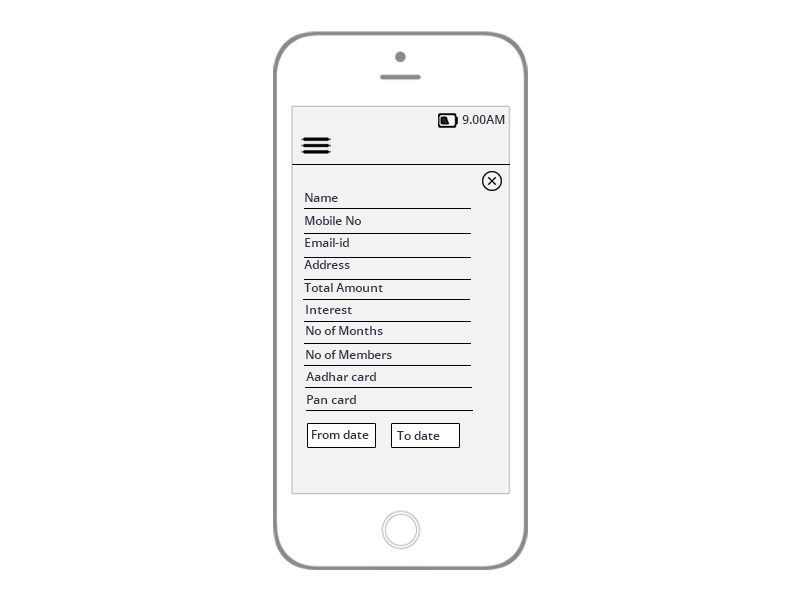
<style>
.page{position:relative;width:800px;height:600px;background:#ffffff}
.page>*{position:absolute;margin:0}
.t1{font:12px "OpenSans-Semibold";color:#2c3445}
</style>
<div class="page">
<p class="t1" style="left:462px;top:115px;width:43px;height:9px">9.00AM</p>
<p class="t1" style="left:305px;top:193px;width:33px;height:9px">Name</p>
<p class="t1" style="left:305px;top:216px;width:56px;height:9px">Mobile No</p>
<p class="t1" style="left:305px;top:238px;width:44px;height:9px">Email-id</p>
<p class="t1" style="left:304px;top:260px;width:46px;height:9px">Address</p>
<p class="t1" style="left:304px;top:283px;width:79px;height:9px">Total Amount</p>
<p class="t1" style="left:306px;top:305px;width:46px;height:9px">Interest</p>
<p class="t1" style="left:306px;top:326px;width:77px;height:9px">No of Months</p>
<p class="t1" style="left:306px;top:350px;width:86px;height:9px">No of Members</p>
<p class="t1" style="left:306px;top:372px;width:70px;height:9px">Aadhar card</p>
<p class="t1" style="left:307px;top:395px;width:49px;height:9px">Pan card</p>
<p class="t1" style="left:312px;top:430px;width:57px;height:9px">From date</p>
<p class="t1" style="left:397px;top:431px;width:43px;height:9px">To date</p>
</div>
